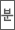
<style>
.page{position:relative;width:15px;height:30px;background:#fefefe}
.page>*{position:absolute;margin:0}
.t1{font:14px "SeoulNamsanEB";letter-spacing:0.05em;color:#5a5a5a}
</style>
<div class="page">
<p class="t1" style="left:1px;top:8px;width:13px;height:14px">분</p>
</div>
